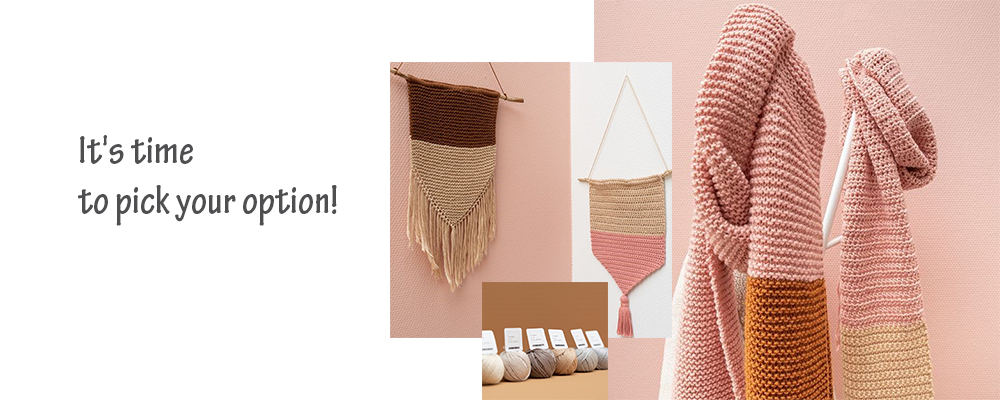
<style>
.page{position:relative;width:1000px;height:400px;background:#ffffff}
.page>*{position:absolute;margin:0}
.t1{font:41.7px "TektonPro-BoldCond";color:#4f4e50}
</style>
<div class="page">
<p class="t1" style="left:78px;top:135px;width:259px;height:91px">It's time <br>to pick your option!</p>
</div>
